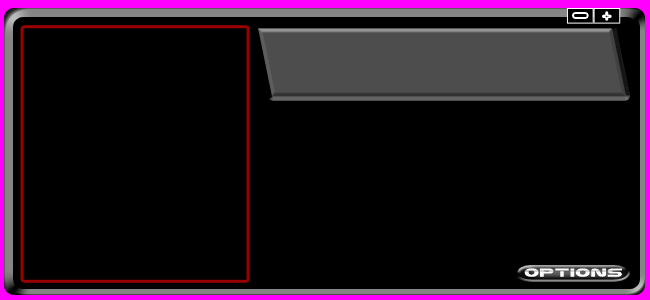
<style>
.page{position:relative;width:650px;height:300px;background:#000000}
.page>*{position:absolute;margin:0}
.t1{font:11.9px "Laserian";letter-spacing:0.05em;color:#ffffff;text-transform:uppercase}
</style>
<div class="page">
<p class="t1" style="left:524px;top:268px;width:98px;height:9px">options</p>
</div>
